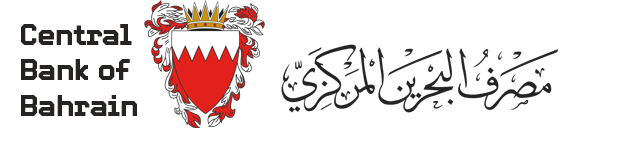
<style>
.page{position:relative;width:621px;height:164px;background:#ffffff}
.page>*{position:absolute;margin:0}
.t1{font:29.6px "Video-Bold";color:#282323}
</style>
<div class="page">
<p class="t1" style="left:21px;top:24px;width:116px;height:92px">Central <br>Bank of<br>Bahrain</p>
</div>
